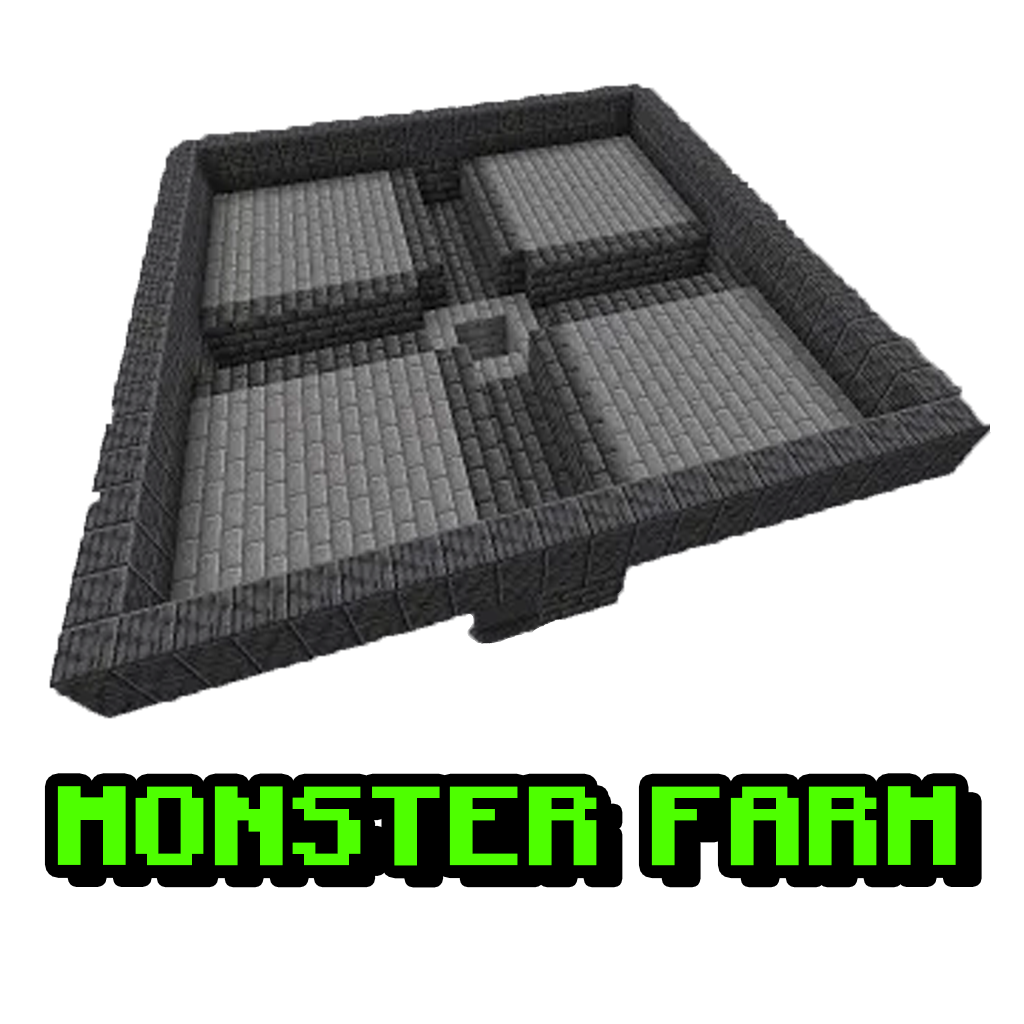
<style>
.page{position:relative;width:1024px;height:1024px;background:#ffffff}
.page>*{position:absolute;margin:0}
.t1{font:112.1px "Minecraft-Bold";color:#4eff00}
</style>
<div class="page">
<p class="t1" style="left:57px;top:786px;width:899px;height:80px">MONSTER FARM</p>
</div>
